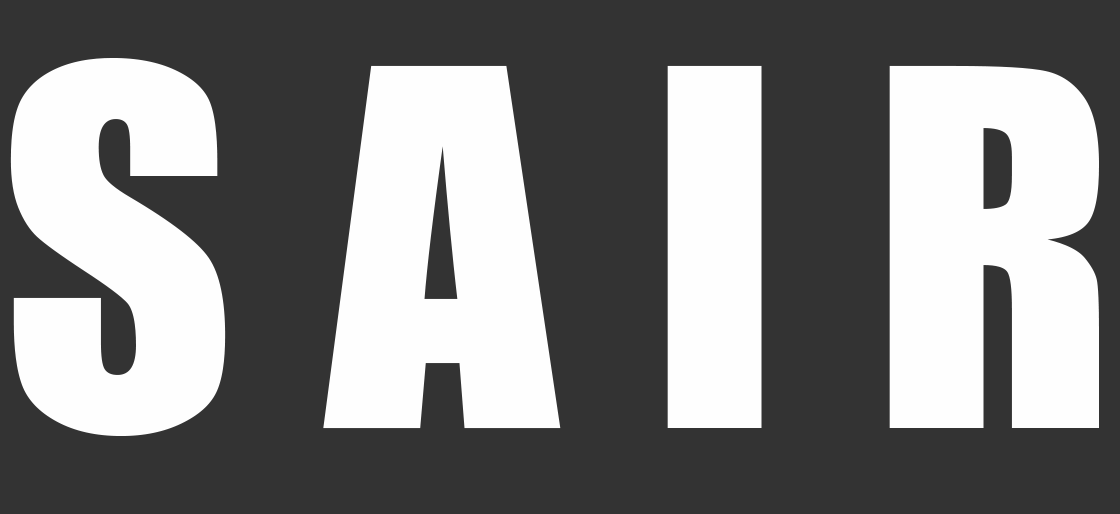
<style>
.page{position:relative;width:1120px;height:514px;background:#333333}
.page>*{position:absolute;margin:0}
.t1{font:458.1px "Impact";letter-spacing:0.2em;color:#fefefe;text-transform:uppercase}
</style>
<div class="page">
<p class="t1" style="left:10px;top:57px;width:1089px;height:379px">sair</p>
</div>
